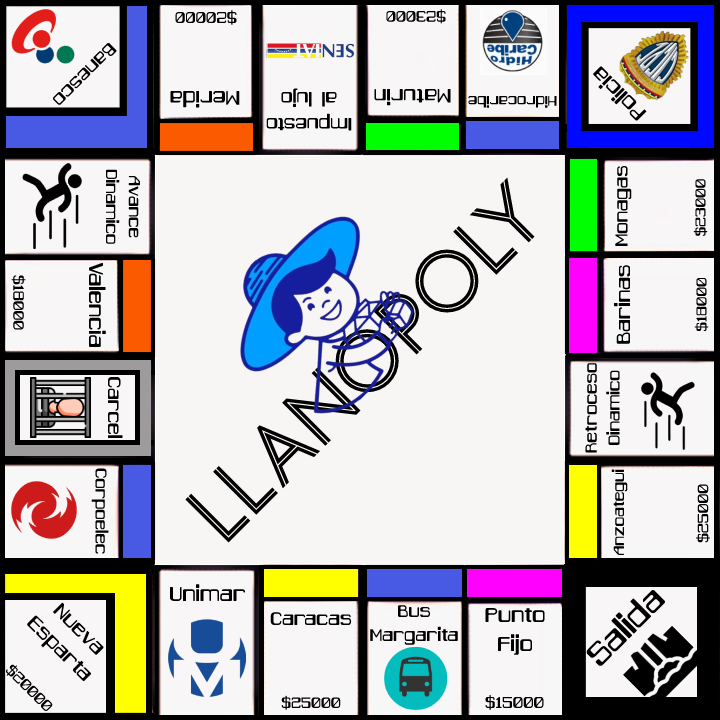
<style>
.page{position:relative;width:720px;height:720px;background:#f8f5f5}
.page>*{position:absolute;margin:0}
.t1{font:18.8px "Caracas";color:#000000}
.t2{font:18.3px "Caracas";color:#000000}
.t3{font:21px "Caracas";color:#000000}
.t4{font:24px "Caracas";color:#000000}
.t5{font:21.3px "Caracas";color:#000000}
.t6{font:23.2px "Caracas";color:#000000}
.t7{font:23.6px "Caracas";color:#000000}
.t8{font:16.8px "Caracas";color:#000000}
.t9{font:19.1px "Caracas";color:#000000}
.t10{font:20.8px "Caracas";color:#000000}
.t11{font:101.5px "Monopoly-Inline";color:#000000}
.t12{font:17.5px "Caracas";color:#000000}
.t13{font:23px "Caracas";color:#000000}
.t14{font:17.8px "Caracas";color:#000000}
.t15{font:17.6px "Caracas";color:#000000}
.t16{font:23.9px "Caracas";color:#000000}
.t17{font:37px "Caracas";color:#000000}
.t18{font:37px "Caracas";color:#9d9b9c}
.t19{font:22.9px "Caracas";color:#000000}
.t20{font:20.2px "Caracas";color:#000000}
.t21{font:21.7px "Caracas";color:#000000}
.t22{font:17.9px "Caracas";color:#000000}
.t23{font:18.1px "Caracas";color:#000000}
.t24{font:19px "Caracas";color:#000000}
</style>
<div class="page">
<p class="t1" style="left:175px;top:10px;width:62px;height:15px;rotate:-180deg">$20000</p>
<p class="t2" style="left:386px;top:9px;width:60px;height:15px;rotate:180deg">$23000</p>
<p class="t3" style="left:53px;top:43px;width:64px;height:62px;rotate:135deg">Banesco</p>
<p class="t4" style="left:593px;top:66px;width:54px;height:55px;rotate:-135deg">Policia</p>
<p class="t5" style="left:266px;top:88px;width:86px;height:43px;text-align:center;rotate:-180deg">Impuesto<br>al lujo</p>
<p class="t6" style="left:374px;top:89px;width:77px;height:17px;rotate:180deg">Maturin</p>
<p class="t7" style="left:170px;top:91px;width:70px;height:17px;rotate:180deg">Merida</p>
<p class="t8" style="left:468px;top:96px;width:89px;height:12px;rotate:-180deg">Hidrocaribe</p>
<p class="t9" style="left:106px;top:169px;width:34px;height:75px;text-align:center;rotate:90deg">Avance<br>Dinamico</p>
<p class="t10" style="left:615px;top:166px;width:17px;height:80px;rotate:-90deg">Monagas</p>
<p class="t11" style="left:185px;top:177px;width:350px;height:366px;rotate:-45deg">LLANOPOLY</p>
<p class="t12" style="left:693px;top:179px;width:15px;height:57px;rotate:-90deg">$23000</p>
<p class="t4" style="left:89px;top:263px;width:17px;height:84px;rotate:90deg">Valencia</p>
<p class="t13" style="left:614px;top:265px;width:16px;height:79px;rotate:-90deg">Barinas</p>
<p class="t14" style="left:11px;top:275px;width:15px;height:55px;rotate:90deg">$18000</p>
<p class="t12" style="left:694px;top:277px;width:15px;height:55px;rotate:-90deg">$18000</p>
<p class="t9" style="left:585px;top:363px;width:35px;height:90px;text-align:center;rotate:-90deg">Retroceso<br>Dinamico</p>
<p class="t5" style="left:108px;top:377px;width:15px;height:61px;rotate:90deg">Carcel</p>
<p class="t1" style="left:91px;top:468px;width:18px;height:86px;rotate:90deg">Corpoelec</p>
<p class="t15" style="left:611px;top:469px;width:17px;height:86px;rotate:-90deg">Anzoategui</p>
<p class="t14" style="left:696px;top:484px;width:14px;height:59px;rotate:-90deg">$25000</p>
<p class="t16" style="left:170px;top:584px;width:75px;height:17px">Unimar</p>
<p class="t17" style="left:586px;top:590px;width:79px;height:76px;rotate:-45deg"><span class="t18">S</span>alida</p>
<p class="t19" style="left:27px;top:602px;width:77px;height:79px;text-align:center;rotate:45deg">Nueva<br>Esparta</p>
<p class="t20" style="left:370px;top:605px;width:88px;height:40px;text-align:center">Bus<br>Margarita</p>
<p class="t21" style="left:270px;top:612px;width:82px;height:13px">Caracas</p>
<p class="t16" style="left:485px;top:608px;width:60px;height:47px;text-align:center">Punto<br>Fijo</p>
<p class="t22" style="left:6px;top:664px;width:47px;height:47px;rotate:45deg">$20000</p>
<p class="t23" style="left:281px;top:695px;width:60px;height:15px">$25000</p>
<p class="t24" style="left:485px;top:695px;width:59px;height:15px">$15000</p>
</div>
